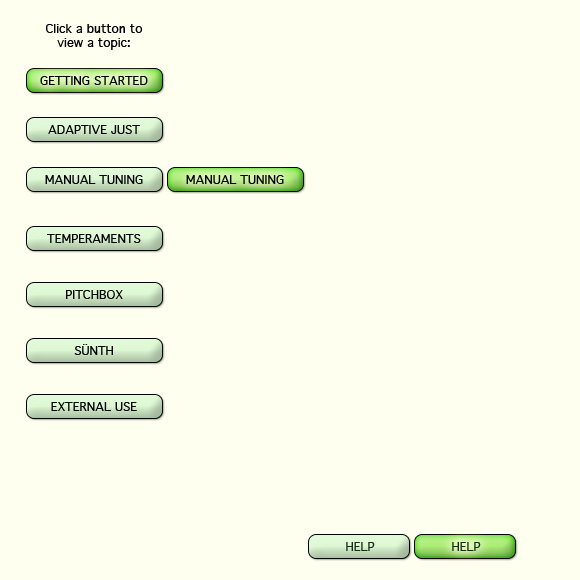
<style>
.page{position:relative;width:580px;height:580px;background:#feffee}
.page>*{position:absolute;margin:0}
.t1{font:12px "Geneva";color:#000000}
.t2{font:12px "Geneva";color:#152d19}
</style>
<div class="page">
<p class="t1" style="left:46px;top:24px;width:97px;height:26px;text-align:center">Click a button to<br>view a topic:</p>
<p class="t1" style="left:40px;top:76px;width:108px;height:9px">GETTING STARTED</p>
<p class="t1" style="left:48px;top:125px;width:92px;height:9px">ADAPTIVE JUST</p>
<p class="t1" style="left:45px;top:175px;width:98px;height:9px">MANUAL TUNING</p>
<p class="t1" style="left:186px;top:175px;width:98px;height:9px">MANUAL TUNING</p>
<p class="t1" style="left:47px;top:234px;width:94px;height:9px">TEMPERAMENTS</p>
<p class="t1" style="left:66px;top:290px;width:57px;height:9px">PITCHBOX</p>
<p class="t1" style="left:74px;top:344px;width:39px;height:11px">SÜNTH</p>
<p class="t1" style="left:51px;top:402px;width:86px;height:9px">EXTERNAL USE</p>
<p class="t2" style="left:346px;top:542px;width:29px;height:9px">HELP</p>
<p class="t2" style="left:452px;top:542px;width:29px;height:9px">HELP</p>
</div>
